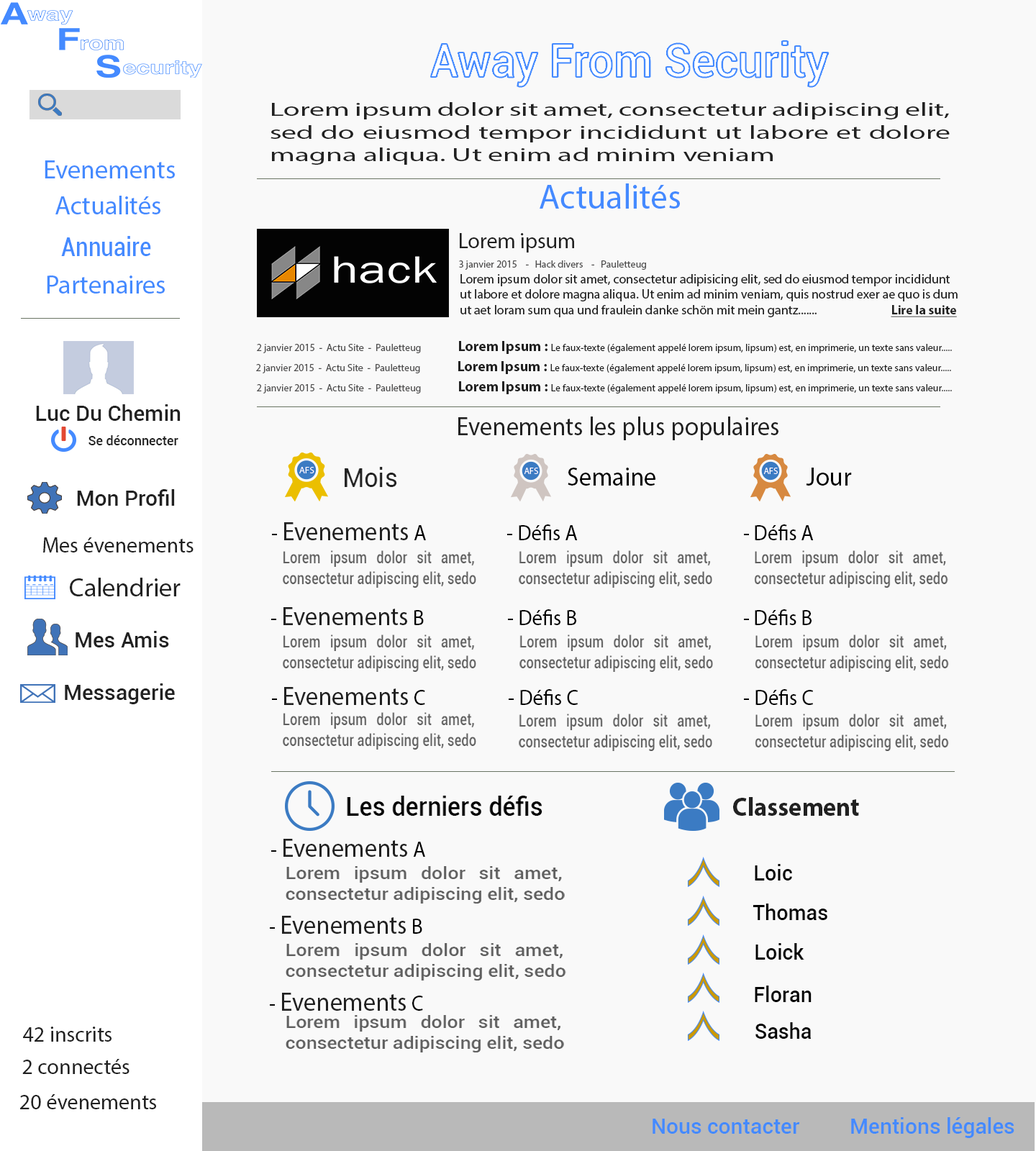
<style>
.page{position:relative;width:1036px;height:1151px;background:#f9f9f9}
.page>*{position:absolute;margin:0}
.t1{font:46.8px "Roboto-Medium";color:#ffffff;scale:0.96 1}
.t2{font:18.8px "MyriadPro-Regular";color:#212121;scale:1.6 1}
.t3{font:25.9px "MyriadPro-Regular";color:#448aff}
.t4{font:34.5px "MyriadPro-Regular";color:#448aff}
.t5{font:21.6px "MyriadPro-Regular";color:#212121}
.t6{font:25.9px "Roboto-Condensed";color:#448aff}
.t7{font:10.1px "MyriadPro-Regular";color:#4e4d4d}
.t8{font:12.9px "MyriadPro-Regular";color:#212121}
.t9{font:12.9px "MyriadPro-Bold";color:#212121;text-decoration:underline}
.t10{font:10.1px "MyriadPro-Regular";color:#212121}
.t11{font:14.4px "MyriadPro-Bold";color:#212121}
.t12{font:21.6px "Roboto-Medium";color:#212121}
.t13{font:25.9px "MyriadPro-Regular";color:#212121;scale:0.96 1}
.t14{font:12.9px "Roboto-Medium";color:#212121}
.t15{font:25.9px "Roboto-Regular";color:#212121;scale:0.96 1}
.t16{font:25.9px "MyriadPro-Regular";color:#010101;scale:0.96 1}
.t17{font:21.6px "MyriadPro-Regular";color:#000000;scale:0.96 1}
.t18{font:17.3px "Roboto-Medium";color:#5f5f5f;scale:0.78 1}
.t19{font:25.9px "MyriadPro-Regular";color:#212121}
.t20{font:25.9px "Roboto-Medium";color:#000000;scale:0.96 1}
.t21{font:25.9px "MyriadPro-Bold";color:#212121;scale:0.96 1}
.t22{font:17.3px "Roboto-Medium";color:#5f5f5f;scale:1.12 1}
.t23{font:21.6px "Roboto-Medium";color:#000000;scale:0.96 1}
.t24{font:17.3px "Roboto-Medium";color:#5f5f5f;scale:1.11 1}
.t25{font:21.6px "Roboto-Medium";color:#448aff}
</style>
<div class="page">
<p class="t1" style="left:431px;top:41px;width:398px;height:46px">Away From Security</p>
<p class="t2" style="left:270px;top:102px;width:680px;height:63px;text-align:justify">Lorem ipsum dolor sit amet, consectetur adipiscing elit, sed do eiusmod tempor incididunt ut labore et dolore magna aliqua. Ut enim ad minim veniam</p>
<p class="t3" style="left:45px;top:160px;width:130px;height:18px">Evenements</p>
<p class="t4" style="left:540px;top:183px;width:140px;height:26px">Actualités</p>
<p class="t3" style="left:55px;top:196px;width:105px;height:18px">Actualités</p>
<p class="t5" style="left:460px;top:233px;width:114px;height:20px">Lorem ipsum</p>
<p class="t6" style="left:61px;top:236px;width:90px;height:20px">Annuaire</p>
<p class="t7" style="left:459px;top:260px;width:187px;height:10px">3 janvier 2015    -   Hack divers    -   Pauletteug</p>
<p class="t3" style="left:47px;top:276px;width:118px;height:18px">Partenaires</p>
<p class="t8" style="left:460px;top:274px;width:498px;height:43px;text-align:center"><span class="t5"><br></span>Lorem ipsum dolor sit amet, consectetur adipisicing elit, sed do eiusmod tempor incididunt ut labore et dolore magna aliqua. Ut enim ad minim veniam, quis nostrud exer ae quo is dum<br>ut aet loram sum qua und fraulein danke schön mit mein gantz.......                           <span class="t9">Lire la suite</span></p>
<p class="t10" style="left:459px;top:341px;width:493px;height:13px"><span class="t11">Lorem Ipsum : </span>Le faux-texte (également appelé lorem ipsum, lipsum) est, en imprimerie, un texte sans valeur.....</p>
<p class="t7" style="left:257px;top:344px;width:164px;height:9px">2 janvier 2015  -  Actu Site  -  Pauletteug</p>
<p class="t7" style="left:256px;top:364px;width:164px;height:9px">2 janvier 2015  -  Actu Site  -  Pauletteug</p>
<p class="t10" style="left:458px;top:361px;width:493px;height:13px"><span class="t11">Lorem Ipsum : </span>Le faux-texte (également appelé lorem ipsum, lipsum) est, en imprimerie, un texte sans valeur.....</p>
<p class="t7" style="left:257px;top:384px;width:164px;height:10px">2 janvier 2015  -  Actu Site  -  Pauletteug</p>
<p class="t10" style="left:459px;top:381px;width:493px;height:13px"><span class="t11">Lorem Ipsum : </span>Le faux-texte (également appelé lorem ipsum, lipsum) est, en imprimerie, un texte sans valeur.....</p>
<p class="t12" style="left:36px;top:404px;width:145px;height:17px">Luc Du Chemin</p>
<p class="t13" style="left:458px;top:417px;width:320px;height:23px">Evenements les plus populaires</p>
<p class="t14" style="left:88px;top:435px;width:90px;height:10px">Se déconnecter</p>
<p class="t15" style="left:345px;top:467px;width:51px;height:20px">Mois</p>
<p class="t16" style="left:568px;top:468px;width:87px;height:18px">Semaine</p>
<p class="t16" style="left:806px;top:468px;width:46px;height:18px">Jour</p>
<p class="t12" style="left:77px;top:489px;width:98px;height:17px">Mon Profil</p>
<p class="t13" style="left:272px;top:522px;width:154px;height:18px"><span class="t17">- </span>Evenements<span class="t17"> A</span></p>
<p class="t17" style="left:507px;top:524px;width:71px;height:16px">- Défis A</p>
<p class="t17" style="left:744px;top:524px;width:70px;height:16px">- Défis A</p>
<p class="t5" style="left:43px;top:537px;width:151px;height:16px">Mes évenements</p>
<p class="t18" style="left:283px;top:550px;width:193px;height:38px;text-align:justify">Lorem ipsum dolor sit amet, consectetur adipiscing elit, sedo</p>
<p class="t18" style="left:519px;top:550px;width:193px;height:38px;text-align:justify">Lorem ipsum dolor sit amet, consectetur adipiscing elit, sedo</p>
<p class="t18" style="left:755px;top:550px;width:193px;height:38px;text-align:justify">Lorem ipsum dolor sit amet, consectetur adipiscing elit, sedo</p>
<p class="t19" style="left:70px;top:578px;width:111px;height:18px">Calendrier</p>
<p class="t13" style="left:271px;top:607px;width:153px;height:18px"><span class="t17">- </span>Evenements<span class="t17"> B</span></p>
<p class="t17" style="left:508px;top:609px;width:68px;height:16px">- Défis B</p>
<p class="t17" style="left:744px;top:609px;width:67px;height:16px">- Défis B</p>
<p class="t12" style="left:76px;top:631px;width:93px;height:16px">Mes Amis</p>
<p class="t18" style="left:283px;top:635px;width:193px;height:37px;text-align:justify">Lorem ipsum dolor sit amet, consectetur adipiscing elit, sedo</p>
<p class="t18" style="left:519px;top:635px;width:194px;height:37px;text-align:justify">Lorem ipsum dolor sit amet, consectetur adipiscing elit, sedo</p>
<p class="t18" style="left:755px;top:635px;width:194px;height:37px;text-align:justify">Lorem ipsum dolor sit amet, consectetur adipiscing elit, sedo</p>
<p class="t12" style="left:65px;top:683px;width:110px;height:21px">Messagerie</p>
<p class="t13" style="left:272px;top:687px;width:153px;height:18px"><span class="t17">- </span>Evenements<span class="t17"> C</span></p>
<p class="t17" style="left:509px;top:689px;width:69px;height:16px">- Défis C</p>
<p class="t17" style="left:744px;top:689px;width:69px;height:16px">- Défis C</p>
<p class="t18" style="left:283px;top:712px;width:193px;height:38px;text-align:justify">Lorem ipsum dolor sit amet, consectetur adipiscing elit, sedo</p>
<p class="t18" style="left:519px;top:714px;width:193px;height:37px;text-align:justify">Lorem ipsum dolor sit amet, consectetur adipiscing elit, sedo</p>
<p class="t18" style="left:755px;top:714px;width:194px;height:37px;text-align:justify">Lorem ipsum dolor sit amet, consectetur adipiscing elit, sedo</p>
<p class="t20" style="left:347px;top:796px;width:195px;height:20px">Les derniers défis</p>
<p class="t21" style="left:733px;top:797px;width:126px;height:19px">Classement</p>
<p class="t13" style="left:271px;top:839px;width:154px;height:18px"><span class="t17">- </span>Evenements<span class="t17"> A</span></p>
<p class="t22" style="left:286px;top:866px;width:279px;height:38px;text-align:justify">Lorem ipsum dolor sit amet, consectetur adipiscing elit, sedo</p>
<p class="t23" style="left:755px;top:864px;width:37px;height:17px">Loic</p>
<p class="t23" style="left:753px;top:904px;width:74px;height:16px">Thomas</p>
<p class="t13" style="left:270px;top:916px;width:152px;height:18px"><span class="t17">- </span>Evenements<span class="t17"> B</span></p>
<p class="t22" style="left:286px;top:943px;width:280px;height:38px;text-align:justify">Lorem ipsum dolor sit amet, consectetur adipiscing elit, sedo</p>
<p class="t23" style="left:755px;top:943px;width:49px;height:17px">Loick</p>
<p class="t23" style="left:755px;top:986px;width:56px;height:16px">Floran</p>
<p class="t13" style="left:270px;top:993px;width:153px;height:18px"><span class="t17">- </span>Evenements<span class="t17"> C</span></p>
<p class="t24" style="left:286px;top:1015px;width:278px;height:37px;text-align:justify">Lorem ipsum dolor sit amet, consectetur adipiscing elit, sedo</p>
<p class="t23" style="left:755px;top:1022px;width:56px;height:17px">Sasha</p>
<p class="t5" style="left:23px;top:1027px;width:89px;height:15px">42 inscrits</p>
<p class="t5" style="left:22px;top:1059px;width:107px;height:15px">2 connectés</p>
<p class="t5" style="left:20px;top:1094px;width:136px;height:15px">20 évenements</p>
<p class="t25" style="left:653px;top:1119px;width:147px;height:15px">Nous contacter</p>
<p class="t25" style="left:851px;top:1117px;width:163px;height:21px">Mentions légales</p>
</div>
